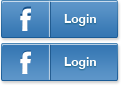
<style>
.page{position:relative;width:121px;height:85px}
.page>*{position:absolute;margin:0}
.t1{font:12px "HelveticaWorld-Bold";color:#ffffff}
</style>
<div class="page">
<p class="t1" style="left:64px;top:14px;width:32px;height:12px">Login</p>
<p class="t1" style="left:64px;top:57px;width:32px;height:12px">Login</p>
</div>
